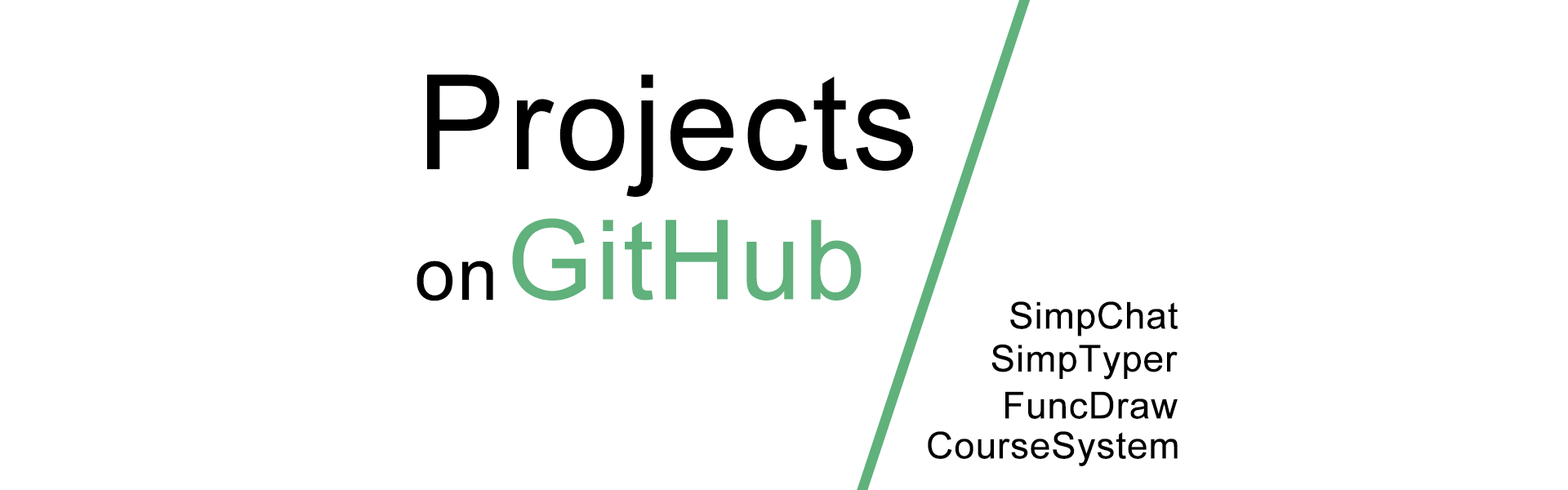
<style>
.page{position:relative;width:1568px;height:490px;background:#ffffff}
.page>*{position:absolute;margin:0}
.t1{font:131.8px "ArialMT";color:#000000;font-weight:bold}
.t2{font:110.5px "ArialMT";color:#60b17c;font-weight:bold}
.t3{font:73.4px "ArialMT";color:#000000;font-weight:bold}
.t4{font:36.9px "ArialMT";color:#000000;font-weight:bold}
</style>
<div class="page">
<p class="t1" style="left:427px;top:74px;width:486px;height:123px">Projects</p>
<p class="t2" style="left:512px;top:218px;width:350px;height:83px">GitHub</p>
<p class="t3" style="left:416px;top:261px;width:77px;height:40px">on</p>
<p class="t4" style="left:1010px;top:301px;width:168px;height:35px">SimpChat</p>
<p class="t4" style="left:991px;top:344px;width:187px;height:36px">SimpTyper</p>
<p class="t4" style="left:1005px;top:391px;width:173px;height:28px">FuncDraw</p>
<p class="t4" style="left:928px;top:431px;width:250px;height:35px">CourseSystem</p>
</div>
